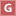
<style>
.page{position:relative;width:16px;height:16px;background:#c05a5a}
.page>*{position:absolute;margin:0}
.t1{font:12px "MyriadPro-Bold";color:#ffffff}
</style>
<div class="page">
<p class="t1" style="left:4px;top:3px;width:8px;height:9px">G</p>
</div>
